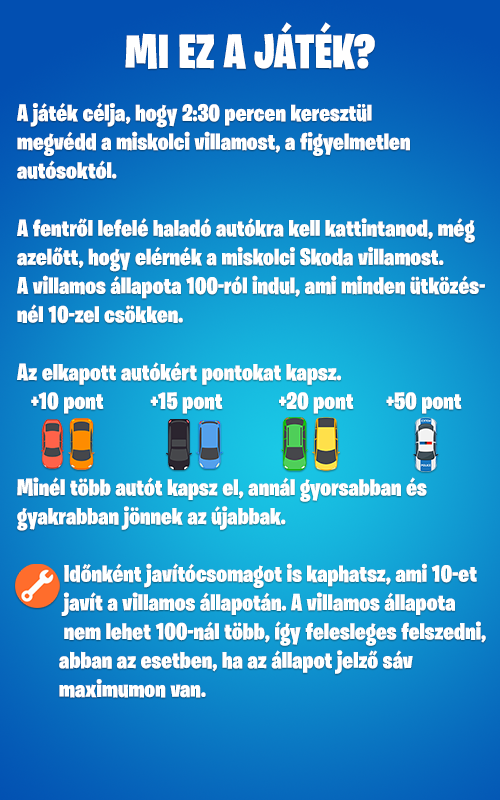
<style>
.page{position:relative;width:500px;height:800px}
.page>*{position:absolute;margin:0}
.t1{font:48px "BurbankBigCondensed-Black";letter-spacing:0.005em;color:#ffffff}
.t2{font:24px "BurbankBigCondensed-Black";letter-spacing:0.005em;color:#ffffff}
</style>
<div class="page">
<p class="t1" style="left:125px;top:22px;width:250px;height:48px">MI EZ A JÁTÉK?</p>
<p class="t2" style="left:17px;top:103px;width:469px;height:595px">A játék célja, hogy 2:30 percen keresztül <br>megvédd a miskolci villamost, a figyelmetlen <br>autósoktól.<br><br>A fentről lefelé haladó autókra kell kattintanod, még<br>azelőtt, hogy elérnék a miskolci Skoda villamost.<br>A villamos állapota 100-ról indul, ami minden ütközés-<br>nél 10-zel csökken.<br><br>Az elkapott autókért pontokat kapsz.<br>   +10 pont          +15 pont            +20 pont       +50 pont<br><br><br>Minél több autót kapsz el, annál gyorsabban és <br>gyakrabban jönnek az újabbak.<br><br>          Időnként javítócsomagot is kaphatsz, ami 10-et<br>          javít a villamos állapotán. A villamos állapota<br>          nem lehet 100-nál több, így felesleges felszedni,<br>         abban az esetben, ha az állapot jelző sáv <br>         maximumon van.</p>
</div>
